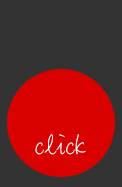
<style>
.page{position:relative;width:122px;height:187px;background:#333333}
.page>*{position:absolute;margin:0}
.t1{font:30px "MLingWaiMedium-SC";color:#ffffff}
</style>
<div class="page">
<p class="t1" style="left:35px;top:134px;width:51px;height:21px">click</p>
</div>
